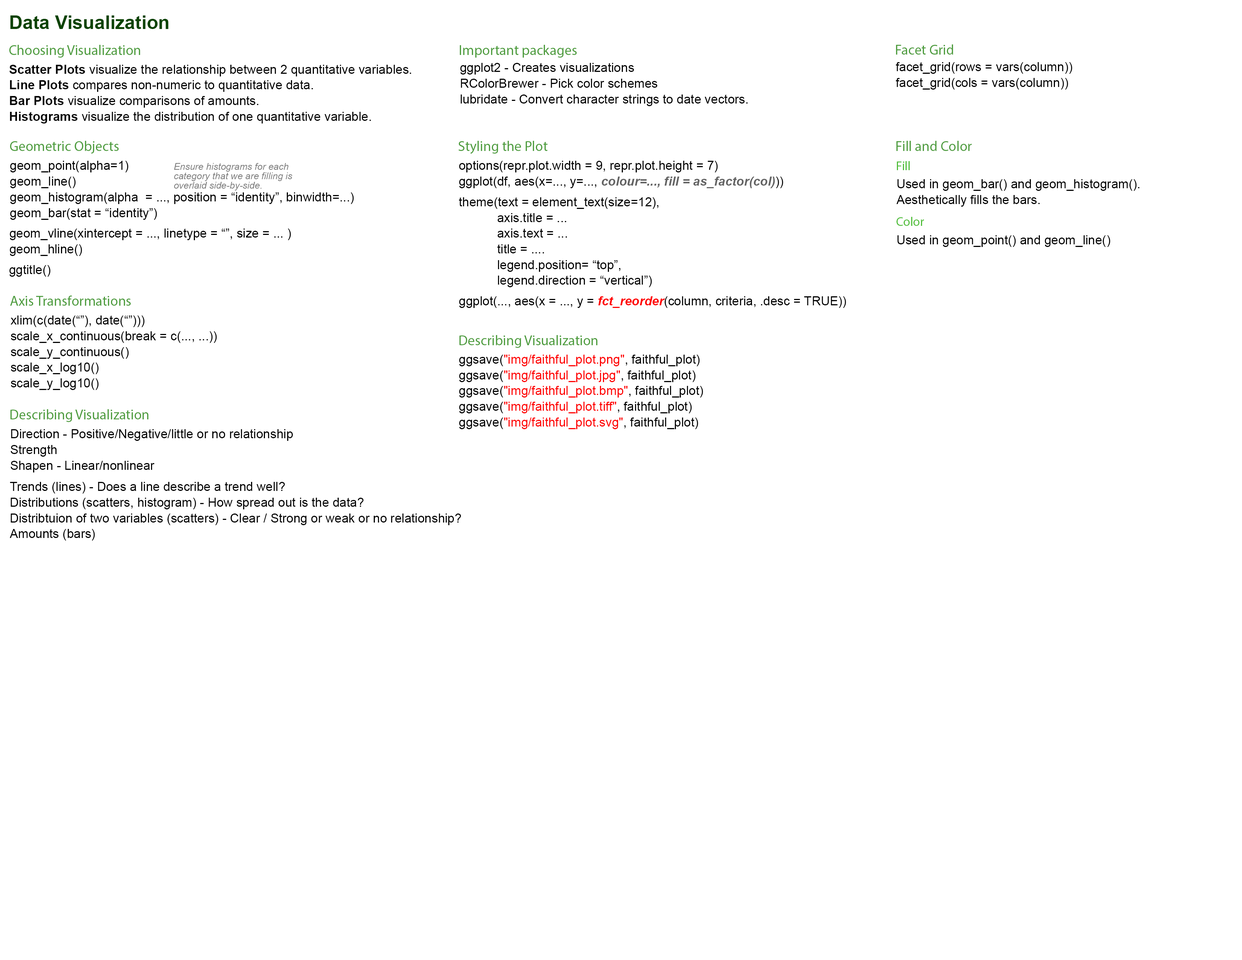
<style>
.page{position:relative;width:1242px;height:960px;background:#ffffff}
.page>*{position:absolute;margin:0}
.t1{font:18.8px "Arial-BoldMT";color:#0b4300}
.t2{font:14.1px "MyriadPro-Regular";color:#4d9c3d}
.t3{font:14.2px "MyriadPro-Regular";color:#4d9c3d}
.t4{font:12.6px/15.7px "ArialMT";color:#000000}
.t5{font:12.6px/15.7px "Arial-BoldMT";color:#000000}
.t6{font:12.6px/15.7px "Arial-BoldItalicMT";color:#636363}
.t7{font:12.6px "MyriadPro-Regular";color:#51be3b}
.t8{font:9.4px/9.4px "Arial-ItalicMT";color:#7b7b7b}
.t9{font:12.5px/15.7px "ArialMT";color:#000000}
.t10{font:12.6px "ArialMT";color:#000000}
.t11{font:12.5px "ArialMT";color:#000000}
.t12{font:12.6px "Arial-BoldItalicMT";color:#ff0000}
.t13{font:12.6px/15.7px "ArialMT";color:#ff0000}
</style>
<div class="page">
<p class="t1" style="left:10px;top:15px;width:159px;height:14px">Data Visualization</p>
<p class="t2" style="left:9px;top:45px;width:131px;height:13px">Choosing Visualization</p>
<p class="t3" style="left:460px;top:45px;width:117px;height:13px">Important packages</p>
<p class="t2" style="left:896px;top:44px;width:58px;height:11px">Facet Grid</p>
<p class="t4" style="left:9px;top:65px;width:402px;height:58px"><span class="t5">Scatter Plots</span> visualize the relationship between 2 quantitative variables.<br><span class="t5">Line Plots</span> compares non-numeric to quantitative data.<br><span class="t5">Bar Plots</span> visualize comparisons of amounts.<br><span class="t5">Histograms</span> visualize the distribution of one quantitative variable.</p>
<p class="t4" style="left:460px;top:63px;width:288px;height:43px">ggplot2 - Creates visualizations<br>RColorBrewer - Pick color schemes<br>lubridate - Convert character strings to date vectors.</p>
<p class="t4" style="left:896px;top:62px;width:176px;height:28px">facet_grid(rows = vars(column))<br>facet_grid(cols = vars(column))</p>
<p class="t2" style="left:10px;top:141px;width:109px;height:13px">Geometric Objects</p>
<p class="t2" style="left:458px;top:141px;width:90px;height:13px">Styling the Plot</p>
<p class="t2" style="left:896px;top:141px;width:76px;height:10px">Fill and Color</p>
<p class="t4" style="left:10px;top:161px;width:344px;height:59px">geom_point(alpha=1)<br>geom_line()<br>geom_histogram(alpha  = ..., position = “identity”, binwidth=...)<br>geom_bar(stat = “identity”)</p>
<p class="t4" style="left:459px;top:161px;width:324px;height:27px">options(repr.plot.width = 9, repr.plot.height = 7)<br>ggplot(df, aes(x=..., y=..., <span class="t6">colour=..., fill = as_factor(col)</span>))</p>
<p class="t7" style="left:897px;top:161px;width:13px;height:9px">Fill</p>
<p class="t8" style="left:174px;top:163px;width:118px;height:27px">Ensure histograms for each <br>category that we are filling is <br>overlaid side-by-side.</p>
<p class="t4" style="left:897px;top:179px;width:243px;height:28px">Used in geom_bar() and geom_histogram().<br>Aesthetically fills the bars.</p>
<p class="t4" style="left:459px;top:197px;width:200px;height:90px">theme(text = element_text(size=12),<br>           axis.title = ...<br>           axis.text = ...<br>           title = ....<br>           legend.position= “top”,<br>           legend.direction = “vertical”)</p>
<p class="t7" style="left:897px;top:217px;width:27px;height:9px">Color</p>
<p class="t9" style="left:10px;top:228px;width:281px;height:28px">geom_vline(xintercept = ..., linetype = “”, size = ... )<br>geom_hline()</p>
<p class="t10" style="left:897px;top:235px;width:213px;height:12px">Used in geom_point() and geom_line()</p>
<p class="t11" style="left:9px;top:265px;width:41px;height:12px">ggtitle()</p>
<p class="t2" style="left:10px;top:296px;width:121px;height:10px">Axis Transformations</p>
<p class="t10" style="left:459px;top:296px;width:387px;height:12px">ggplot(..., aes(x = ..., y = <span class="t12">fct_reorder</span>(column, criteria, .desc = TRUE))</p>
<p class="t4" style="left:11px;top:315px;width:206px;height:75px">xlim(c(date(“”), date(“”)))<br>scale_x_continuous(break = c(..., ...))<br>scale_y_continuous()<br>scale_x_log10()<br>scale_y_log10()</p>
<p class="t3" style="left:459px;top:335px;width:139px;height:13px">Describing Visualization</p>
<p class="t4" style="left:459px;top:355px;width:244px;height:74px">ggsave(<span class="t13">"img/faithful_plot.png"</span>, faithful_plot)<br>ggsave(<span class="t13">"img/faithful_plot.jpg"</span>, faithful_plot)<br>ggsave(<span class="t13">"img/faithful_plot.bmp"</span>, faithful_plot)<br>ggsave(<span class="t13">"img/faithful_plot.tiff"</span>, faithful_plot)<br>ggsave(<span class="t13">"img/faithful_plot.svg"</span>, faithful_plot)</p>
<p class="t2" style="left:10px;top:409px;width:139px;height:13px">Describing Visualization</p>
<p class="t4" style="left:11px;top:429px;width:282px;height:43px">Direction - Positive/Negative/little or no relationship<br>Strength <br>Shapen - Linear/nonlinear</p>
<p class="t4" style="left:10px;top:482px;width:451px;height:59px">Trends (lines) - Does a line describe a trend well?<br>Distributions (scatters, histogram) - How spread out is the data?<br>Distribtuion of two variables (scatters) - Clear / Strong or weak or no relationship?<br>Amounts (bars)</p>
</div>
